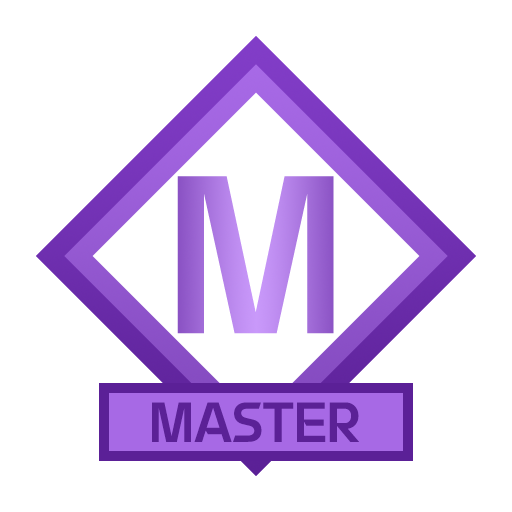
<style>
.page{position:relative;width:512px;height:512px;background:#ffffff}
.page>*{position:absolute;margin:0}
.t1{font:200px "yspotlight-regular"}
.t2{font:50px "yspotlight-regular";color:#5b2196}
</style>
<div class="page">
<p class="t1" style="left:177px;top:176px;width:157px;height:158px">M</p>
<p class="t2" style="left:152px;top:402px;width:207px;height:40px">MASTER</p>
</div>
